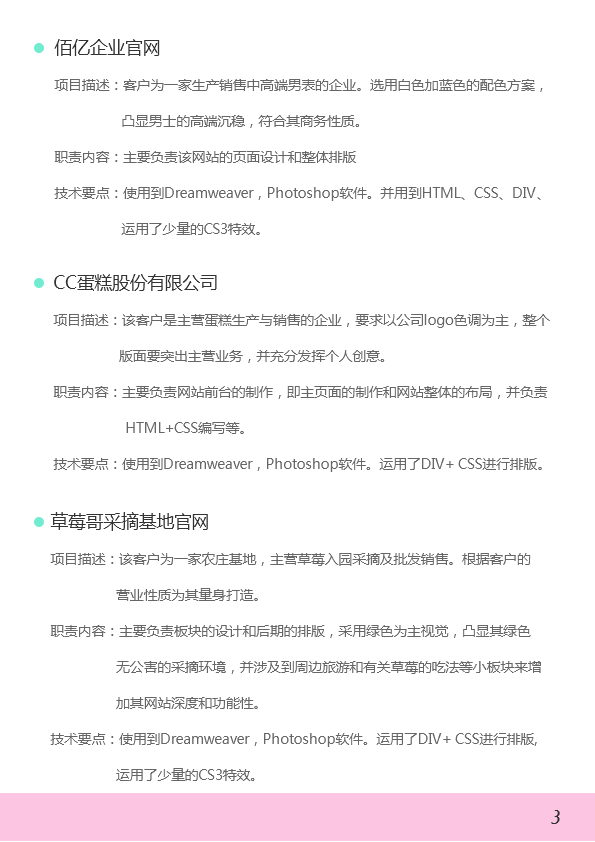
<style>
.page{position:relative;width:595px;height:842px;background:#ffffff}
.page>*{position:absolute;margin:0}
.t1{font:14px/36px "MicrosoftYaHei";letter-spacing:-0.02em;color:#666666}
.t2{font:18px/46px "MicrosoftYaHei";letter-spacing:-0.02em;color:#333333}
.t3{font:18px "Freehand521BT-RegularC";letter-spacing:-0.02em;color:#333333}
</style>
<div class="page">
<p class="t1" style="left:54px;top:39px;width:489px;height:196px"><span class="t2">佰亿企业官网<br></span>项目描述：客户为一家生产销售中高端男表的企业。选用白色加蓝色的配色方案，<br>                  凸显男士的高端沉稳，符合其商务性质。<br>职责内容：主要负责该网站的页面设计和整体排版<br>技术要点：使用到Dreamweaver，Photoshop软件。并用到HTML、CSS、DIV、<br>                  运用了少量的CS3特效。</p>
<p class="t1" style="left:53px;top:274px;width:497px;height:198px"><span class="t2">CC蛋糕股份有限公司<br></span>项目描述：该客户是主营蛋糕生产与销售的企业，要求以公司logo色调为主，整个<br>         版面要突出主营业务，并充分发挥个人创意。<br>职责内容：主要负责网站前台的制作，即主页面的制作和网站整体的布局，并负责<br>  HTML+CSS编写等。<br>技术要点：使用到Dreamweaver，Photoshop软件。运用了DIV+ CSS进行排版。</p>
<p class="t1" style="left:50px;top:512px;width:491px;height:269px"><span class="t2">草莓哥采摘基地官网<br></span>项目描述：该客户为一家农庄基地，主营草莓入园采摘及批发销售。根据客户的<br>         营业性质为其量身打造。<br>职责内容：主要负责板块的设计和后期的排版，采用绿色为主视觉，凸显其绿色<br>         无公害的采摘环境，并涉及到周边旅游和有关草莓的吃法等小板块来增<br>         加其网站深度和功能性。<br>技术要点：使用到Dreamweaver，Photoshop软件。运用了DIV+ CSS进行排版,<br>         运用了少量的CS3特效。</p>
<p class="t3" style="left:551px;top:810px;width:9px;height:14px">3</p>
</div>
